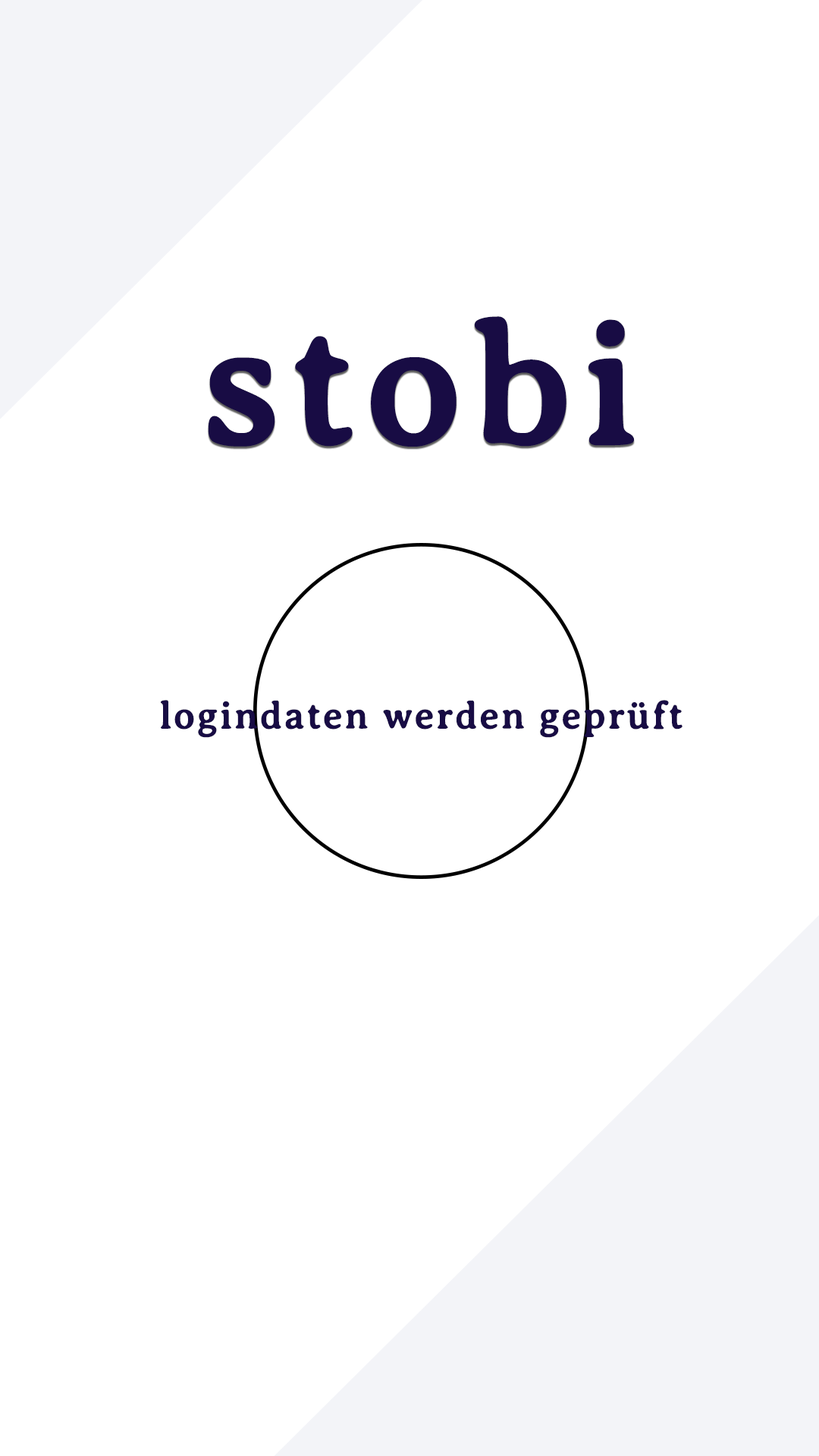
<style>
.page{position:relative;width:819px;height:1456px;background:#ffffff}
.page>*{position:absolute;margin:0}
.t1{font:173.8px "AveriaSerifLibre-Regular";letter-spacing:0.04em;color:#180c44;font-weight:bold}
.t2{font:37.9px "AveriaSerifLibre-Regular";letter-spacing:0.04em;color:#180c44;font-weight:bold}
</style>
<div class="page">
<p class="t1" style="left:208px;top:316px;width:426px;height:131px">stobi</p>
<p class="t2" style="left:161px;top:700px;width:521px;height:38px">logindaten werden geprüft</p>
</div>
